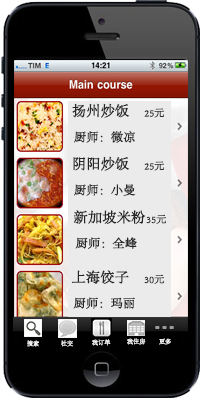
<style>
.page{position:relative;width:200px;height:400px;background:#ebebeb}
.page>*{position:absolute;margin:0}
.t1{font:14px "AdobeSongStd-Light";color:#272727;font-weight:bold}
.t2{font:10px "AdobeSongStd-Light";color:#272727;font-weight:bold}
.t3{font:12px "AdobeSongStd-Light";color:#272727;font-weight:bold}
.t4{font:13.9px "AdobeSongStd-Light";color:#272727;font-weight:bold}
.t5{font:9.9px "AdobeSongStd-Light";color:#272727;font-weight:bold}
.t6{font:11.9px "AdobeSongStd-Light";color:#272727;font-weight:bold}
.t7{font:6px "AdobeSongStd-Light";color:#ffffff;font-weight:bold}
</style>
<div class="page">
<p class="t1" style="left:72px;top:103px;width:58px;height:15px">扬州炒饭</p>
<p class="t2" style="left:144px;top:108px;width:20px;height:10px">25元</p>
<p class="t3" style="left:74px;top:131px;width:61px;height:12px">厨师：微凉</p>
<p class="t1" style="left:73px;top:156px;width:57px;height:15px">阴阳炒饭</p>
<p class="t2" style="left:144px;top:161px;width:20px;height:10px">25元</p>
<p class="t3" style="left:74px;top:184px;width:62px;height:12px">厨师：小曼</p>
<p class="t4" style="left:73px;top:210px;width:73px;height:14px">新加坡米粉</p>
<p class="t5" style="left:146px;top:214px;width:20px;height:10px">35元</p>
<p class="t6" style="left:75px;top:237px;width:62px;height:12px">厨师：全峰</p>
<p class="t4" style="left:71px;top:270px;width:58px;height:14px">上海饺子</p>
<p class="t5" style="left:144px;top:274px;width:20px;height:10px">30元</p>
<p class="t6" style="left:73px;top:297px;width:62px;height:12px">厨师：玛丽</p>
<p class="t7" style="left:27px;top:340px;width:12px;height:7px">搜索</p>
<p class="t7" style="left:61px;top:340px;width:12px;height:7px">社交</p>
<p class="t7" style="left:92px;top:339px;width:19px;height:7px">我订单</p>
<p class="t7" style="left:127px;top:338px;width:19px;height:7px">我住房</p>
<p class="t7" style="left:159px;top:338px;width:12px;height:7px">更多</p>
</div>
